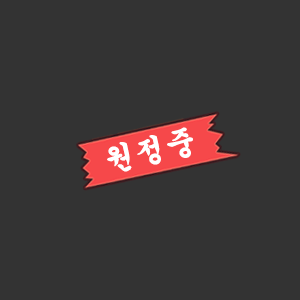
<style>
.page{position:relative;width:300px;height:300px;background:#333333}
.page>*{position:absolute;margin:0}
.t1{font:30px "GungsuhChe";color:#ffffff;font-weight:bold}
</style>
<div class="page">
<p class="t1" style="left:107px;top:127px;width:86px;height:45px;rotate:-13deg">원정중</p>
</div>
